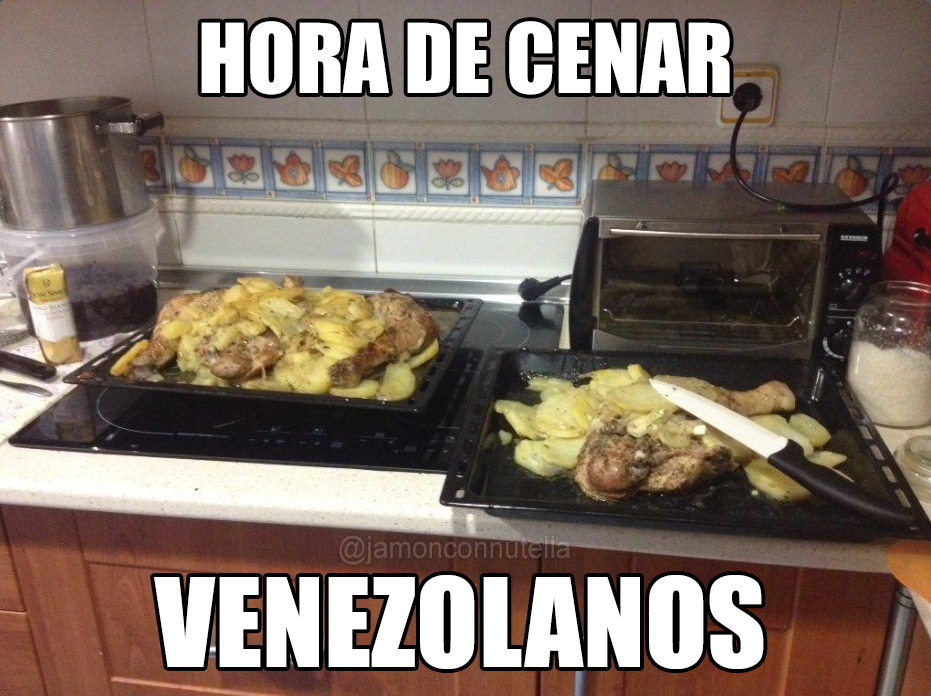
<style>
.page{position:relative;width:931px;height:696px}
.page>*{position:absolute;margin:0}
.t1{font:88.9px "Impact";color:#ffffff}
.t2{font:30.6px "ArialMT";color:#6a504c;scale:0.92 1}
.t3{font:114px "Impact";color:#ffffff}
</style>
<div class="page">
<p class="t1" style="left:201px;top:21px;width:529px;height:74px">HORA DE CENAR</p>
<p class="t2" style="left:339px;top:535px;width:231px;height:30px">@jamonconnutella</p>
<p class="t3" style="left:154px;top:575px;width:610px;height:94px">VENEZOLANOS</p>
</div>
